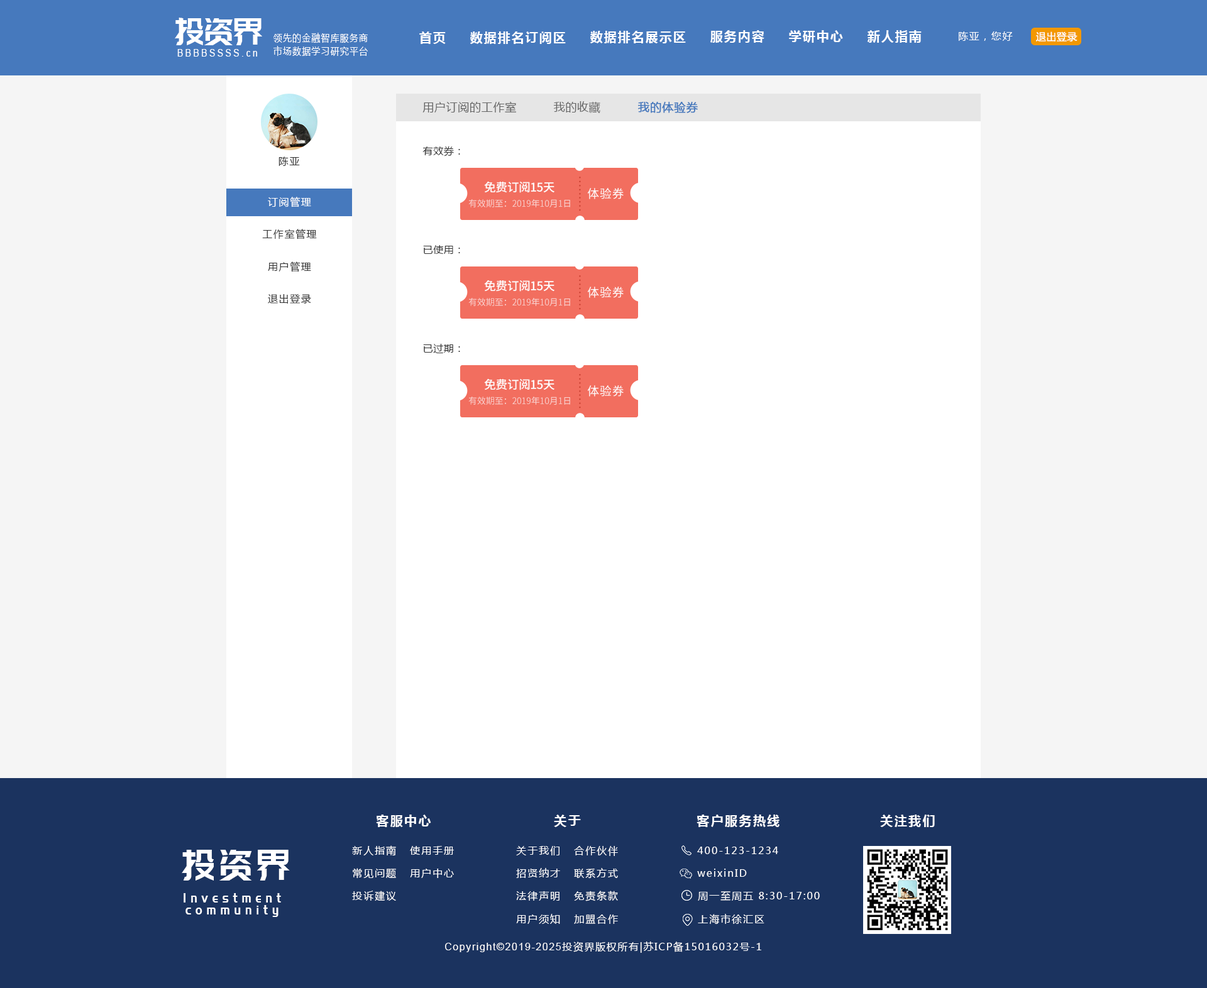
<style>
.page{position:relative;width:1207px;height:988px;background:#ffffff}
.page>*{position:absolute;margin:0}
.t1{font:37.4px "PangMenZhengDao";color:#ffffff;scale:0.86 1}
.t2{font:10.1px "MicrosoftYaHei";letter-spacing:0.1em;color:#ffffff;scale:0.86 1}
.t3{font:12.6px "MicrosoftYaHei-Bold";letter-spacing:0.1em;color:#ffffff}
.t4{font:10.1px "MicrosoftYaHei";letter-spacing:0.1em;color:#ffffff}
.t5{font:10.1px "MicrosoftYaHei";letter-spacing:0.03em;color:#ffffff}
.t6{font:10.1px "ArialMT";letter-spacing:0.26em;color:#ffffff;scale:0.86 1}
.t7{font:11.3px "MicrosoftYaHei";letter-spacing:0.04em;color:#666666}
.t8{font:11.3px "MicrosoftYaHei";letter-spacing:0.04em;color:#4679bd;font-weight:bold}
.t9{font:10.1px "MicrosoftYaHei";letter-spacing:0.04em;color:#333333}
.t10{font:10.1px "MicrosoftYaHei";letter-spacing:0.1em;color:#333333}
.t11{font:11.9px "SourceHanSansCN-Medium";letter-spacing:-0.025em;color:#fefefe}
.t12{font:8.6px "Ebrima-Bold";letter-spacing:0.2em;color:#c73d2d}
.t13{font:11.9px "SourceHanSansCN-Regular";letter-spacing:0.055em;color:#fefefe}
.t14{font:8.8px "SourceHanSansCN-Normal";letter-spacing:-0.005em;color:#fad8d5}
.t15{font:12.6px "MicrosoftYaHei-Bold";letter-spacing:0.12em;color:#ffffff}
.t16{font:10.1px "MicrosoftYaHei";letter-spacing:0.12em;color:#ffffff}
.t17{font:42.7px "PangMenZhengDao";letter-spacing:0.1em;color:#ffffff;scale:0.86 1}
.t18{font:13.6px/11.9px "PangMenZhengDao";letter-spacing:0.36em;color:#ffffff;scale:0.86 1}
.t19{font:10.1px "ArialMT";letter-spacing:0.1em;color:#ffffff}
</style>
<div class="page">
<p class="t1" style="left:175px;top:18px;width:87px;height:27px">投资界</p>
<p class="t2" style="left:273px;top:33px;width:95px;height:10px">领先的金融智库服务商</p>
<p class="t3" style="left:419px;top:31px;width:27px;height:13px">首页</p>
<p class="t3" style="left:470px;top:31px;width:96px;height:13px">数据排名订阅区</p>
<p class="t3" style="left:590px;top:31px;width:96px;height:12px">数据排名展示区</p>
<p class="t3" style="left:710px;top:30px;width:54px;height:13px">服务内容</p>
<p class="t3" style="left:789px;top:30px;width:54px;height:13px">学研中心</p>
<p class="t3" style="left:867px;top:30px;width:54px;height:13px">新人指南</p>
<p class="t4" style="left:959px;top:31px;width:54px;height:10px">陈亚，您好</p>
<p class="t5" style="left:1036px;top:31px;width:41px;height:10px">退出登录</p>
<p class="t6" style="left:177px;top:49px;width:80px;height:8px">BBBBSSSS.cn</p>
<p class="t2" style="left:273px;top:46px;width:95px;height:10px">市场数据学习研究平台</p>
<p class="t7" style="left:422px;top:101px;width:94px;height:12px">用户订阅的工作室</p>
<p class="t7" style="left:553px;top:101px;width:47px;height:12px">我的收藏</p>
<p class="t8" style="left:638px;top:102px;width:60px;height:11px">我的体验券</p>
<p class="t9" style="left:422px;top:146px;width:38px;height:11px">有效券：</p>
<p class="t10" style="left:278px;top:157px;width:22px;height:9px">陈亚</p>
<p class="t11" style="left:484px;top:181px;width:70px;height:12px">免费订阅15天</p>
<p class="t12" style="left:579px;top:177px;width:2px;height:34px;rotate:90deg">.........</p>
<p class="t4" style="left:268px;top:197px;width:43px;height:10px">订阅管理</p>
<p class="t13" style="left:587px;top:188px;width:37px;height:11px">体验券</p>
<p class="t14" style="left:468px;top:199px;width:102px;height:8px">有效期至：2019年10月1日</p>
<p class="t10" style="left:262px;top:229px;width:55px;height:10px">工作室管理</p>
<p class="t9" style="left:423px;top:245px;width:37px;height:9px">已使用：</p>
<p class="t10" style="left:268px;top:261px;width:43px;height:11px">用户管理</p>
<p class="t11" style="left:484px;top:280px;width:70px;height:12px">免费订阅15天</p>
<p class="t12" style="left:579px;top:275px;width:2px;height:35px;rotate:90deg">.........</p>
<p class="t10" style="left:268px;top:294px;width:43px;height:10px">退出登录</p>
<p class="t13" style="left:587px;top:287px;width:37px;height:11px">体验券</p>
<p class="t14" style="left:468px;top:298px;width:102px;height:8px">有效期至：2019年10月1日</p>
<p class="t9" style="left:423px;top:344px;width:37px;height:9px">已过期：</p>
<p class="t12" style="left:579px;top:374px;width:2px;height:35px;rotate:90deg">.........</p>
<p class="t11" style="left:484px;top:378px;width:70px;height:12px">免费订阅15天</p>
<p class="t13" style="left:587px;top:385px;width:37px;height:12px">体验券</p>
<p class="t14" style="left:468px;top:397px;width:102px;height:8px">有效期至：2019年10月1日</p>
<p class="t15" style="left:376px;top:815px;width:55px;height:12px">客服中心</p>
<p class="t15" style="left:554px;top:815px;width:27px;height:12px">关于</p>
<p class="t15" style="left:696px;top:815px;width:83px;height:12px">客户服务热线</p>
<p class="t15" style="left:880px;top:815px;width:55px;height:12px">关注我们</p>
<p class="t16" style="left:352px;top:845px;width:44px;height:11px">新人指南</p>
<p class="t17" style="left:182px;top:850px;width:108px;height:31px">投资界</p>
<p class="t16" style="left:410px;top:846px;width:44px;height:9px">使用手册</p>
<p class="t16" style="left:516px;top:846px;width:43px;height:9px">关于我们</p>
<p class="t16" style="left:574px;top:846px;width:44px;height:10px">合作伙伴</p>
<p class="t16" style="left:697px;top:847px;width:81px;height:7px">400-123-1234</p>
<p class="t16" style="left:353px;top:868px;width:43px;height:11px">常见问题</p>
<p class="t16" style="left:410px;top:869px;width:44px;height:9px">用户中心</p>
<p class="t16" style="left:516px;top:868px;width:44px;height:10px">招贤纳才</p>
<p class="t16" style="left:574px;top:868px;width:44px;height:11px">联系方式</p>
<p class="t16" style="left:697px;top:869px;width:50px;height:8px">weixinID</p>
<p class="t18" style="left:184px;top:893px;width:97px;height:24px;text-align:center">Investment<br>community</p>
<p class="t16" style="left:352px;top:891px;width:44px;height:10px">投诉建议</p>
<p class="t16" style="left:516px;top:891px;width:43px;height:10px">法律声明</p>
<p class="t16" style="left:574px;top:891px;width:44px;height:10px">免责条款</p>
<p class="t16" style="left:698px;top:891px;width:122px;height:10px">周一至周五 8:30-17:00</p>
<p class="t16" style="left:516px;top:914px;width:44px;height:10px">用户须知</p>
<p class="t16" style="left:574px;top:915px;width:44px;height:9px">加盟合作</p>
<p class="t16" style="left:698px;top:914px;width:66px;height:11px">上海市徐汇区</p>
<p class="t4" style="left:445px;top:942px;width:316px;height:11px"><span class="t19">Copyright©2019-2025</span>投资界版权所有|苏ICP备15016032号-1</p>
</div>
